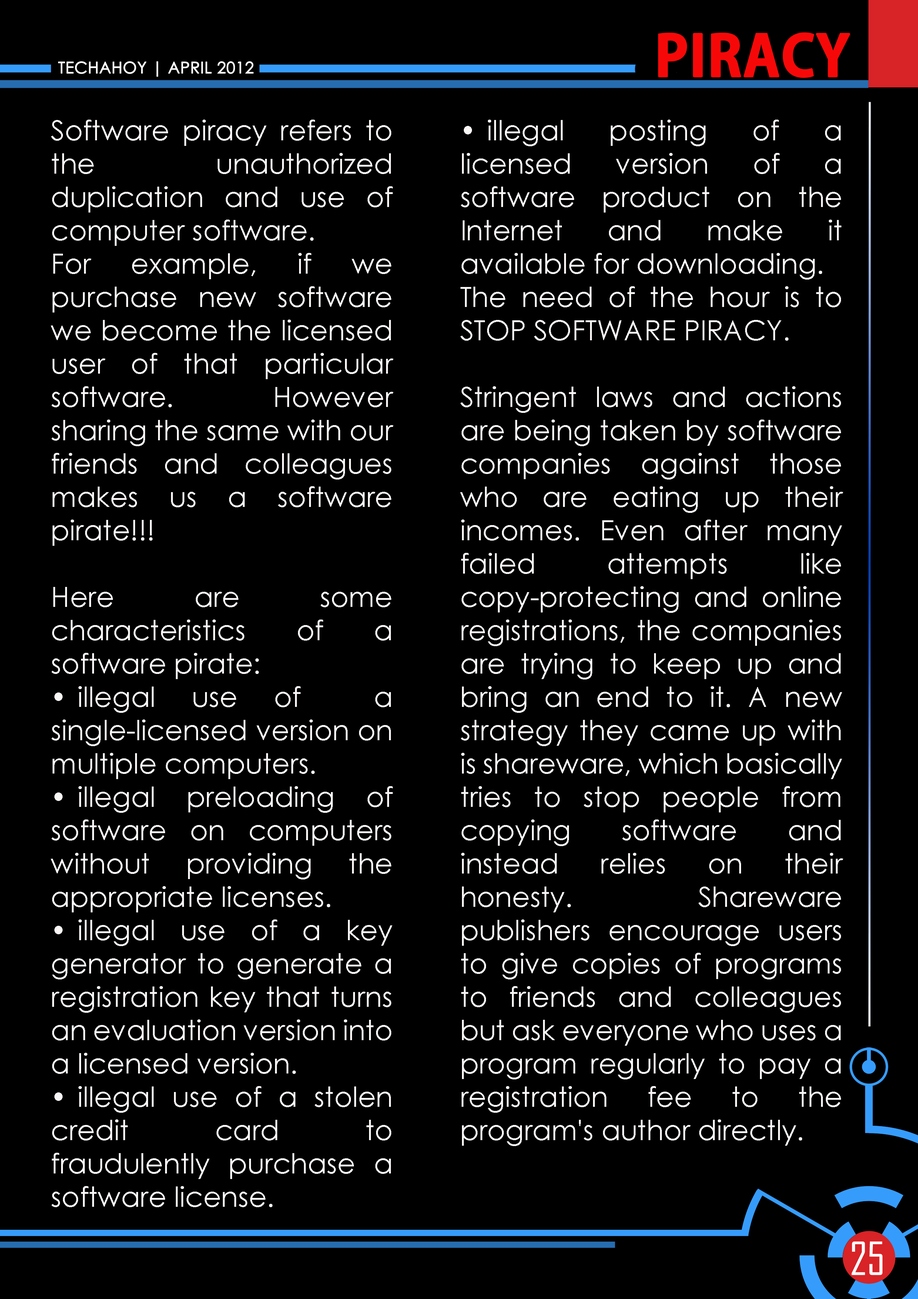
<style>
.page{position:relative;width:918px;height:1299px;background:#000000}
.page>*{position:absolute;margin:0}
.t1{font:55.5px "AdobeGothicStd-Bold";color:#f70808;text-transform:uppercase;font-weight:bold}
.t2{font:16px "CenturyGothic";color:#ffffff;text-transform:uppercase;font-weight:bold}
.t3{font:27.8px "CenturyGothic";color:#fbf7f7}
.t4{font:43.7px "AgencyFB-Reg";color:#ffffff;text-transform:uppercase}
</style>
<div class="page">
<p class="t1" style="left:658px;top:32px;width:192px;height:46px">piracy</p>
<p class="t2" style="left:58px;top:61px;width:196px;height:16px">techahoy | APRIL 2012</p>
<p class="t3" style="left:51px;top:120px;width:343px;height:1087px;text-align:justify">Software piracy refers to the unauthorized duplication and use of computer software.<br>For example, if we purchase new software we become the licensed user of that particular software. However sharing the same with our friends and colleagues makes us a software pirate!!! <br><br>Here are some characteristics of a software pirate:<br>• illegal use of  a single-licensed version on multiple computers.<br>• illegal preloading of software on computers without providing the appropriate licenses.<br>• illegal use of a key generator to generate a registration key that turns an evaluation version into a licensed version.<br>• illegal use of a stolen credit card to fraudulently purchase a software license.</p>
<p class="t3" style="left:460px;top:120px;width:383px;height:1026px;text-align:justify">• illegal posting of a licensed version of a software product on the Internet and make it available for downloading.<br>The need of the hour is to STOP SOFTWARE PIRACY.<br><br>Stringent laws and actions are being taken by software companies against those who are eating up their incomes. Even after many failed attempts like copy-protecting and online registrations, the companies are trying to keep up and bring an end to it. A new strategy they came up with is shareware, which basically tries to stop people from copying software and instead relies on their honesty. Shareware publishers encourage users to give copies of programs to friends and colleagues but ask everyone who uses a program regularly to pay a registration fee to the program's author directly.</p>
<p class="t4" style="left:852px;top:1241px;width:31px;height:34px">25</p>
</div>
